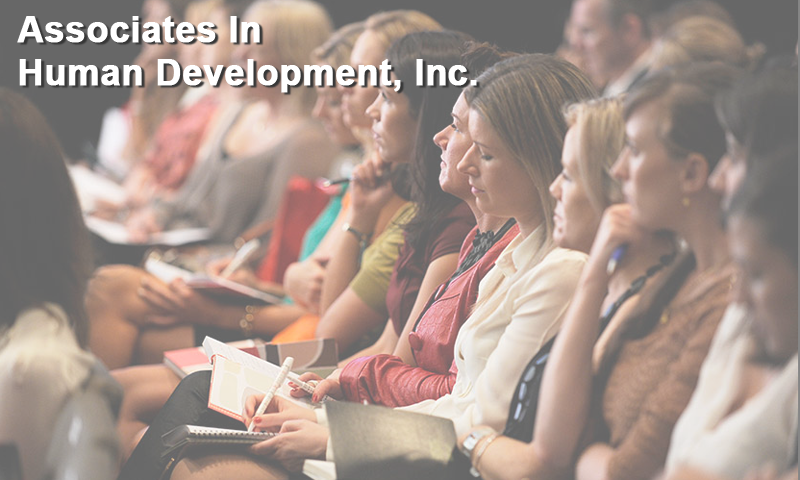
<style>
.page{position:relative;width:800px;height:480px}
.page>*{position:absolute;margin:0}
.t1{font:36px "Arial-BoldMT";color:#ffffff;font-weight:bold}
</style>
<div class="page">
<p class="t1" style="left:17px;top:16px;width:460px;height:77px">Associates In<br>Human Development, Inc.</p>
</div>
